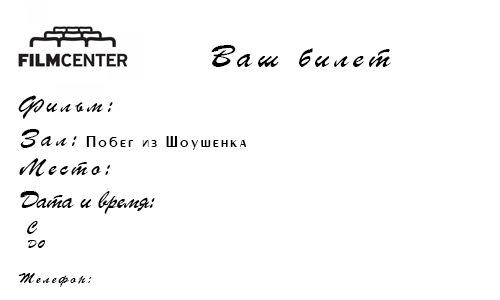
<style>
.page{position:relative;width:500px;height:300px;background:#ffffff}
.page>*{position:absolute;margin:0}
.t1{font:33.5px "ParsekCyrillic";letter-spacing:0.14em;color:#000000}
.t2{font:25px "ParsekCyrillic";letter-spacing:0.14em;color:#000000}
.t3{font:17px "Peignot_cyr";letter-spacing:0.14em;color:#000000}
.t4{font:25px "ParsekCyrillic";letter-spacing:-0.04em;color:#000000}
.t5{font:15.4px "ParsekCyrillic";letter-spacing:0.14em;color:#000000}
.t6{font:11.4px "ParsekCyrillic";letter-spacing:0.14em;color:#000000}
.t7{font:15.1px "ParsekCyrillic";letter-spacing:0.14em;color:#000000}
</style>
<div class="page">
<p class="t1" style="left:211px;top:45px;width:180px;height:22px">Ваш билет</p>
<p class="t2" style="left:18px;top:95px;width:95px;height:24px">Фильм:</p>
<p class="t2" style="left:20px;top:129px;width:57px;height:19px">Зал:</p>
<p class="t3" style="left:86px;top:136px;width:161px;height:14px">Побег из Шоушенка</p>
<p class="t2" style="left:19px;top:158px;width:91px;height:19px">Место:</p>
<p class="t4" style="left:20px;top:191px;width:135px;height:23px">Дата и время:</p>
<p class="t5" style="left:27px;top:221px;width:11px;height:13px">C</p>
<p class="t6" style="left:27px;top:240px;width:18px;height:8px">ДО</p>
<p class="t7" style="left:18px;top:273px;width:74px;height:14px">Телефон:</p>
</div>
